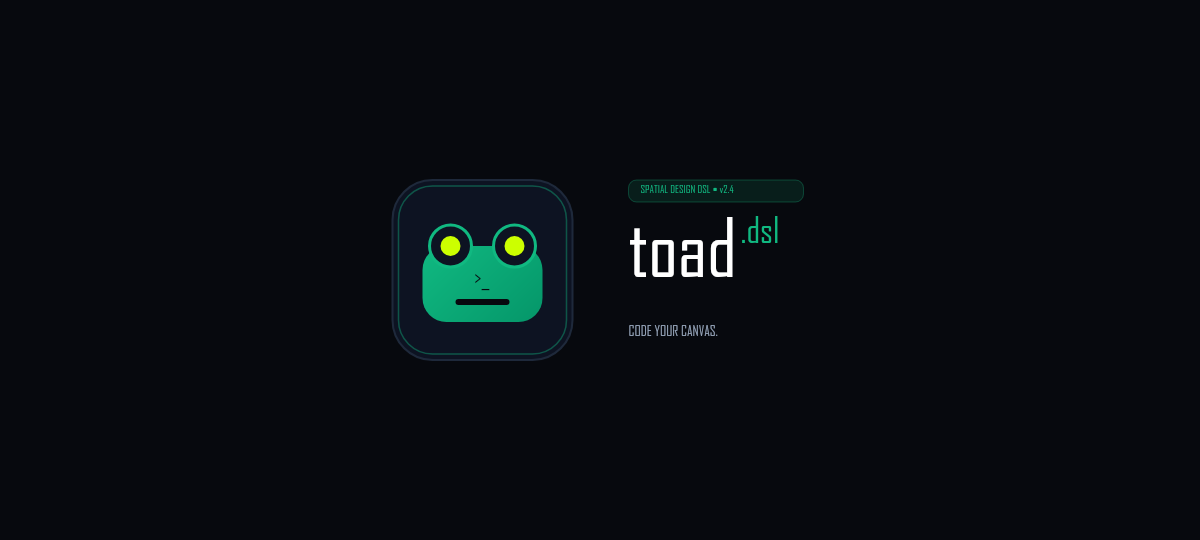
<style>
.page{position:relative;width:1200px;height:540px;background:#07090e}
.page>*{position:absolute;margin:0}
.t1{font:11px "sans-serif-Bold";letter-spacing:0.182em;font-weight:bold}
.t2{font:78px "sans-serif-Regular";letter-spacing:-0.026em;color:#ffffff;font-weight:bold}
.t3{font:36px "sans-serif-Regular";color:#10b981;font-weight:bold}
.t4{font:22px "sans-serif-Regular";color:#07090e;font-weight:bold}
.t5{font:14px "sans-serif-Bold";letter-spacing:0.357em;color:#6b7687;font-weight:bold}
</style>
<div class="page">
<p class="t1" style="left:641px;top:184px;width:151px;height:14px">SPATIAL DESIGN DSL • v2.4</p>
<p class="t2" style="left:629px;top:214px;width:110px;height:98px">toad</p>
<p class="t3" style="left:741px;top:214px;width:43px;height:45px">.dsl</p>
<p class="t4" style="left:474px;top:268px;width:17px;height:28px">&gt;_</p>
<p class="t5" style="left:629px;top:324px;width:179px;height:18px">CODE YOUR CANVAS.</p>
</div>
